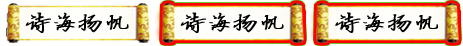
<style>
.page{position:relative;width:463px;height:46px}
.page>*{position:absolute;margin:0}
.t1{font:21px "FZYBXSJW--GB1-0";color:#000000;font-weight:bold;scale:1.2 1}
</style>
<div class="page">
<p class="t1" style="left:25px;top:12px;width:104px;height:21px">诗海扬帆</p>
<p class="t1" style="left:180px;top:12px;width:104px;height:21px">诗海扬帆</p>
<p class="t1" style="left:335px;top:12px;width:103px;height:21px">诗海扬帆</p>
</div>
